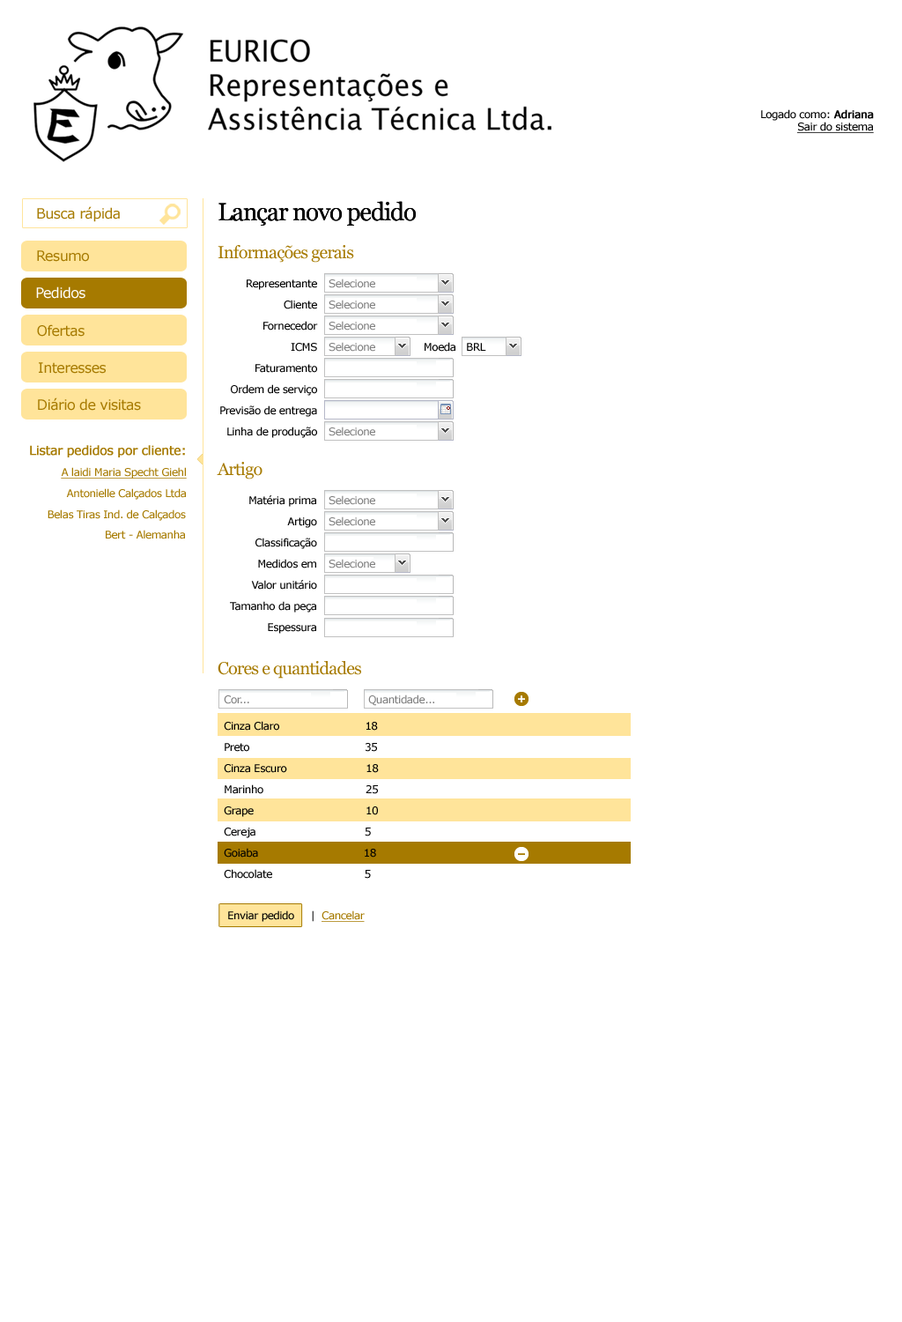
<style>
.page{position:relative;width:902px;height:1322px;background:#ffffff}
.page>*{position:absolute;margin:0}
.t1{font:10.6px "Verdana";letter-spacing:-0.04em;color:#000000;text-decoration:underline}
.t2{font:10.6px "Verdana";letter-spacing:-0.04em;color:#000000}
.t3{font:10.6px "Verdana";letter-spacing:-0.04em;color:#000000;font-weight:bold}
.t4{font:14.1px "Verdana";letter-spacing:-0.04em;color:#a67a00}
.t5{font:24.7px "Georgia";letter-spacing:-0.04em;color:#000000}
.t6{font:17.6px "Georgia";letter-spacing:-0.04em;color:#a67a00}
.t7{font:10.6px/21.1px "Verdana";letter-spacing:-0.04em;color:#000000}
.t8{font:10.6px "Verdana";letter-spacing:-0.04em;color:#808080}
.t9{font:14.1px "Verdana";letter-spacing:-0.04em;color:#ffffff}
.t10{font:12.3px "Verdana";letter-spacing:-0.04em;color:#a67a00;font-weight:bold}
.t11{font:10.6px "Verdana";letter-spacing:-0.04em;color:#a67a00;text-decoration:underline}
.t12{font:10.6px "Verdana";letter-spacing:-0.04em;color:#a67a00}
</style>
<div class="page">
<p class="t1" style="left:761px;top:109px;width:113px;height:24px;text-align:right"><span class="t2">Logado como: </span><span class="t3">Adriana<br></span>Sair do sistema</p>
<p class="t4" style="left:37px;top:206px;width:83px;height:16px">Busca rápida</p>
<p class="t5" style="left:219px;top:201px;width:197px;height:25px">Lançar novo pedido</p>
<p class="t5" style="left:219px;top:201px;width:197px;height:25px">Lançar novo pedido</p>
<p class="t6" style="left:218px;top:245px;width:136px;height:18px">Informações gerais</p>
<p class="t4" style="left:37px;top:250px;width:52px;height:12px">Resumo</p>
<p class="t7" style="left:220px;top:279px;width:98px;height:159px;text-align:right">Representante<br>Cliente<br>Fornecedor<br>ICMS<br>Faturamento<br>Ordem de serviço<br>Previsão de entrega<br>Linha de produção</p>
<p class="t8" style="left:329px;top:278px;width:46px;height:10px">Selecione</p>
<p class="t9" style="left:36px;top:286px;width:49px;height:13px">Pedidos</p>
<p class="t8" style="left:329px;top:300px;width:46px;height:9px">Selecione</p>
<p class="t4" style="left:37px;top:324px;width:48px;height:13px">Ofertas</p>
<p class="t8" style="left:329px;top:321px;width:46px;height:9px">Selecione</p>
<p class="t8" style="left:329px;top:342px;width:46px;height:10px">Selecione</p>
<p class="t2" style="left:425px;top:342px;width:31px;height:10px">Moeda</p>
<p class="t2" style="left:467px;top:343px;width:19px;height:8px">BRL</p>
<p class="t4" style="left:39px;top:362px;width:67px;height:12px">Interesses</p>
<p class="t4" style="left:38px;top:397px;width:103px;height:14px">Diário de visitas</p>
<p class="t8" style="left:329px;top:426px;width:46px;height:10px">Selecione</p>
<p class="t10" style="left:30px;top:445px;width:155px;height:12px">Listar pedidos por cliente:</p>
<p class="t6" style="left:217px;top:462px;width:46px;height:17px">Artigo</p>
<p class="t11" style="left:61px;top:467px;width:126px;height:11px">A laidi Maria Specht Giehl</p>
<p class="t12" style="left:66px;top:488px;width:120px;height:12px">Antonielle Calçados Ltda</p>
<p class="t7" style="left:230px;top:495px;width:87px;height:139px;text-align:right">Matéria prima<br>Artigo<br>Classificação<br>Medidos em<br>Valor unitário<br>Tamanho da peça<br>Espessura</p>
<p class="t8" style="left:329px;top:495px;width:46px;height:10px">Selecione</p>
<p class="t12" style="left:48px;top:509px;width:138px;height:12px">Belas Tiras Ind. de Calçados</p>
<p class="t8" style="left:329px;top:516px;width:46px;height:10px">Selecione</p>
<p class="t12" style="left:106px;top:530px;width:79px;height:9px">Bert - Alemanha</p>
<p class="t8" style="left:329px;top:559px;width:46px;height:9px">Selecione</p>
<p class="t6" style="left:218px;top:661px;width:143px;height:17px">Cores e quantidades</p>
<p class="t8" style="left:224px;top:694px;width:210px;height:12px">Cor...                                    Quantidade...</p>
<p class="t7" style="left:224px;top:721px;width:155px;height:157px">Cinza Claro                          18<br>Preto                                   35<br>Cinza Escuro                        18<br>Marinho                               25<br>Grape                                  10<br>Cereja                                 5<br>Goiaba                                18<br>Chocolate                            5</p>
<p class="t2" style="left:228px;top:910px;width:137px;height:12px">Enviar pedido     |  <span class="t11">Cancelar</span></p>
</div>
